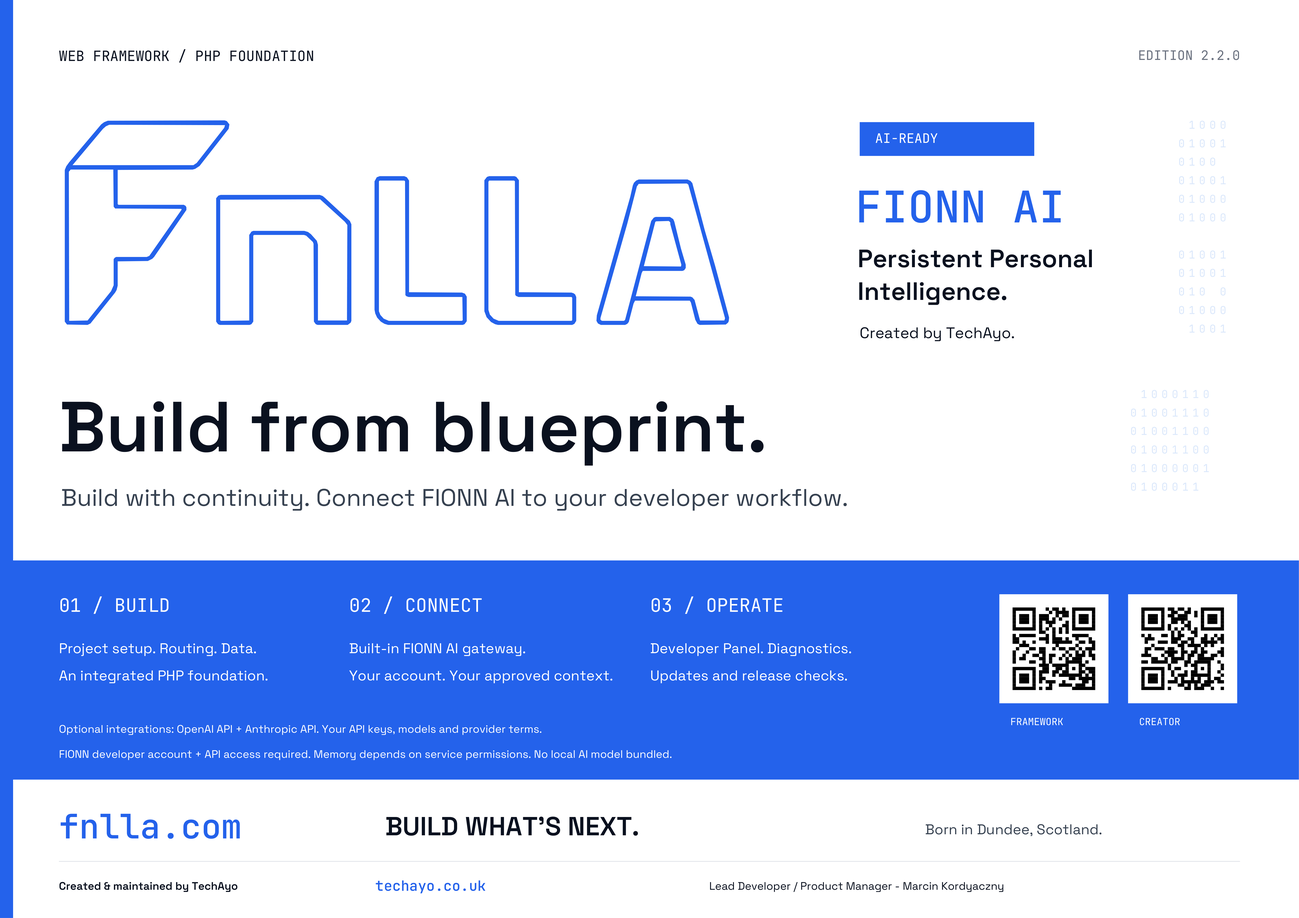
<style>
.page{position:relative;width:1299px;height:918px;background:#ffffff}
.page>*{position:absolute;margin:0}
.t1{font:14.2px "JetBrainsMono-Regular";color:#0b1220}
.t2{font:13.1px "JetBrainsMono-Regular";color:#6b7280}
.t3{font:13.1px "JetBrainsMono-Regular";color:#ffffff}
.t4{font:43.6px "JetBrainsMono-SemiBold";color:#2563eb}
.t5{font:25.1px "SpaceGrotesk-SemiBold";color:#0b1220}
.t6{font:15.3px "SpaceGrotesk-Regular";color:#0b1220}
.t7{font:70.9px "SpaceGrotesk-SemiBold";color:#0b1220}
.t8{font:24px "SpaceGrotesk-Regular";color:#374151}
.t9{font:18.5px "JetBrainsMono-Regular";color:#ffffff}
.t10{font:14.2px "SpaceGrotesk-Regular";color:#ffffff}
.t11{font:10.9px "SpaceGrotesk-Regular";color:#ffffff}
.t12{font:9.8px "JetBrainsMono-Regular";color:#ffffff}
.t13{font:33.8px "JetBrainsMono-SemiBold";color:#2563eb}
.t14{font:26.2px "SpaceGrotesk-SemiBold";color:#0b1220}
.t15{font:14.2px "SpaceGrotesk-Regular";color:#374151}
.t16{font:10.9px "SpaceGrotesk-SemiBold";color:#0b1220}
.t17{font:14.2px "JetBrainsMono-SemiBold";color:#2563eb}
.t18{font:10.9px "SpaceGrotesk-Regular";color:#0b1220}
</style>
<div class="page">
<p class="t1" style="left:58px;top:46px;width:257px;height:20px">WEB FRAMEWORK / PHP FOUNDATION</p>
<p class="t2" style="left:1137px;top:46px;width:103px;height:19px">EDITION 2.2.0</p>
<p class="t3" style="left:874px;top:129px;width:64px;height:18px">AI-READY</p>
<p class="t4" style="left:854px;top:177px;width:211px;height:59px">FIONN AI</p>
<p class="t5" style="left:857px;top:242px;width:237px;height:33px">Persistent Personal</p>
<p class="t5" style="left:857px;top:275px;width:151px;height:33px">Intelligence.</p>
<p class="t6" style="left:859px;top:322px;width:156px;height:21px">Created by TechAyo.</p>
<p class="t7" style="left:58px;top:381px;width:710px;height:92px">Build from blueprint.</p>
<p class="t8" style="left:60px;top:482px;width:789px;height:32px">Build with continuity. Connect FIONN AI to your developer workflow.</p>
<p class="t9" style="left:58px;top:592px;width:113px;height:26px">01 / BUILD</p>
<p class="t9" style="left:348px;top:592px;width:135px;height:26px">02 / CONNECT</p>
<p class="t9" style="left:649px;top:592px;width:135px;height:26px">03 / OPERATE</p>
<p class="t10" style="left:58px;top:639px;width:199px;height:19px">Project setup. Routing. Data.</p>
<p class="t10" style="left:348px;top:639px;width:178px;height:19px">Built-in FIONN AI gateway.</p>
<p class="t10" style="left:649px;top:639px;width:203px;height:19px">Developer Panel. Diagnostics.</p>
<p class="t10" style="left:58px;top:666px;width:211px;height:19px">An integrated PHP foundation.</p>
<p class="t10" style="left:348px;top:666px;width:266px;height:19px">Your account. Your approved context.</p>
<p class="t10" style="left:649px;top:666px;width:199px;height:19px">Updates and release checks.</p>
<p class="t11" style="left:58px;top:721px;width:484px;height:16px">Optional integrations: OpenAI API + Anthropic API. Your API keys, models and provider terms.</p>
<p class="t12" style="left:1009px;top:715px;width:55px;height:14px">FRAMEWORK</p>
<p class="t12" style="left:1138px;top:715px;width:43px;height:14px">CREATOR</p>
<p class="t11" style="left:58px;top:747px;width:615px;height:15px">FIONN developer account + API access required. Memory depends on service permissions. No local AI model bundled.</p>
<p class="t13" style="left:58px;top:804px;width:184px;height:45px">fnlla.com</p>
<p class="t14" style="left:384px;top:809px;width:256px;height:35px">BUILD WHAT'S NEXT.</p>
<p class="t15" style="left:924px;top:820px;width:179px;height:19px">Born in Dundee, Scotland.</p>
<p class="t16" style="left:58px;top:878px;width:180px;height:16px">Created &amp; maintained by TechAyo</p>
<p class="t17" style="left:375px;top:876px;width:111px;height:20px">techayo.co.uk</p>
<p class="t18" style="left:708px;top:878px;width:297px;height:16px">Lead Developer / Product Manager - Marcin Kordyaczny</p>
</div>
